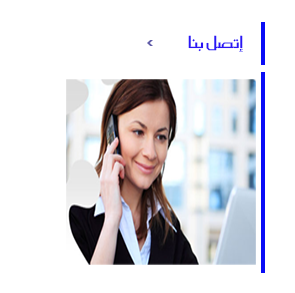
<style>
.page{position:relative;width:295px;height:293px;background:#ffffff}
.page>*{position:absolute;margin:0}
.t1{font:20px "SC_KHALID";color:#2b16f5}
</style>
<div class="page">
<p class="t1" style="left:188px;top:35px;width:55px;height:17px">إتصل بنا</p>
</div>
